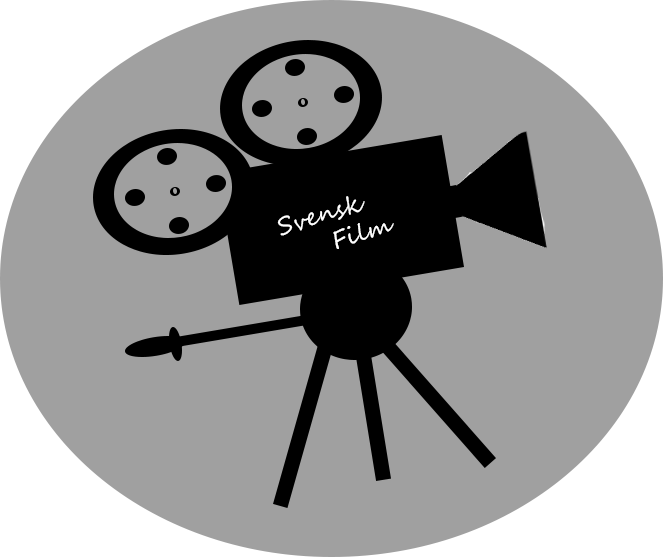
<style>
.page{position:relative;width:663px;height:557px;background:#a0a0a0}
.page>*{position:absolute;margin:0}
.t1{font:24px "SegoeScript";color:#ffffff}
</style>
<div class="page">
<p class="t1" style="left:277px;top:196px;width:117px;height:53px;rotate:-17deg">Svensk <br>     Film</p>
</div>
